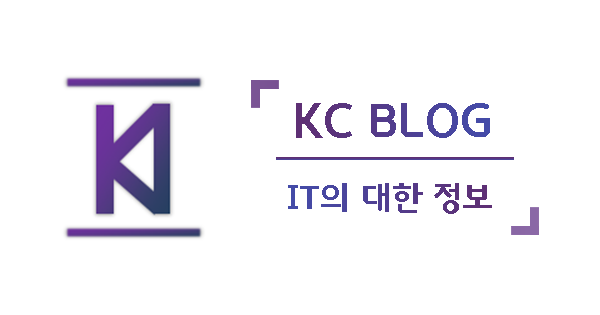
<style>
.page{position:relative;width:600px;height:315px;background:#ffffff}
.page>*{position:absolute;margin:0}
.t1{font:45.8px "GodoB"}
.t2{font:33.3px "GodoB";color:#523c8c}
</style>
<div class="page">
<p class="t1" style="left:296px;top:103px;width:194px;height:35px">KC BLOG</p>
<p class="t2" style="left:288px;top:183px;width:204px;height:31px">IT의 대한 정보</p>
</div>
